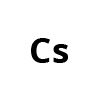
<style>
.page{position:relative;width:100px;height:100px;background:#ffffff}
.page>*{position:absolute;margin:0}
.t1{font:35px "OpenSans-Bold";color:#000000}
</style>
<div class="page">
<p class="t1" style="left:31px;top:38px;width:37px;height:25px">Cs</p>
</div>
